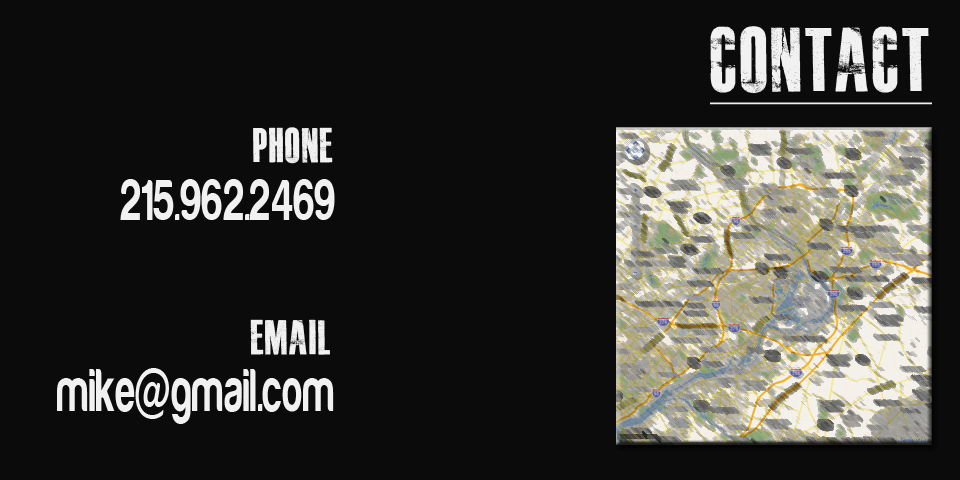
<style>
.page{position:relative;width:960px;height:480px;background:#0b0b0b}
.page>*{position:absolute;margin:0}
.t1{font:90px "MASTERPLAN-TRIAL";color:#f1f1f1;text-decoration:underline}
.t2{font:48px "MASTERPLAN-TRIAL";color:#f1f1f1}
.t3{font:60px "Harabara";letter-spacing:0.025em;color:#f1f1f1;scale:0.67 1}
.t4{font:62.1px "Harabara";letter-spacing:0.025em;color:#f1f1f1;scale:0.63 1}
</style>
<div class="page">
<p class="t1" style="left:710px;top:26px;width:222px;height:79px">Contact</p>
<p class="t2" style="left:253px;top:127px;width:80px;height:37px">phone</p>
<p class="t3" style="left:120px;top:179px;width:215px;height:41px">215.962.2469</p>
<p class="t2" style="left:250px;top:319px;width:80px;height:36px">Email</p>
<p class="t4" style="left:57px;top:368px;width:277px;height:56px">mike@gmail.com</p>
</div>
